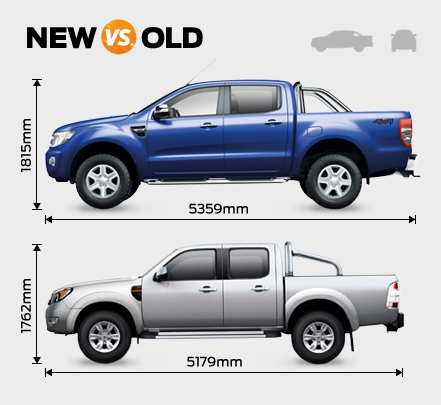
<style>
.page{position:relative;width:441px;height:405px;background:#ececec}
.page>*{position:absolute;margin:0}
.t1{font:27.9px "Antenna-Black";letter-spacing:-0.04em;color:#000000;text-transform:uppercase}
.t2{font:13px "Antenna-Medium";color:#000000}
</style>
<div class="page">
<p class="t1" style="left:27px;top:27px;width:70px;height:22px">NEW</p>
<p class="t1" style="left:141px;top:27px;width:62px;height:22px">OLD</p>
<p class="t2" style="left:21px;top:119px;width:10px;height:53px;rotate:-90deg">1815mm</p>
<p class="t2" style="left:189px;top:203px;width:59px;height:11px">5359mm</p>
<p class="t2" style="left:21px;top:279px;width:10px;height:54px;rotate:-90deg">1762mm</p>
<p class="t2" style="left:187px;top:356px;width:55px;height:11px">5179mm</p>
</div>
